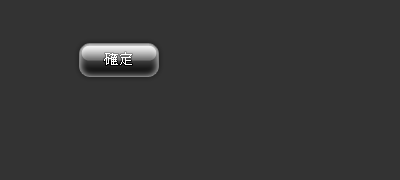
<style>
.page{position:relative;width:400px;height:180px;background:#333333}
.page>*{position:absolute;margin:0}
.t1{font:14px "MingLiU";color:#ffffff}
</style>
<div class="page">
<p class="t1" style="left:104px;top:52px;width:28px;height:13px">確 定</p>
</div>
